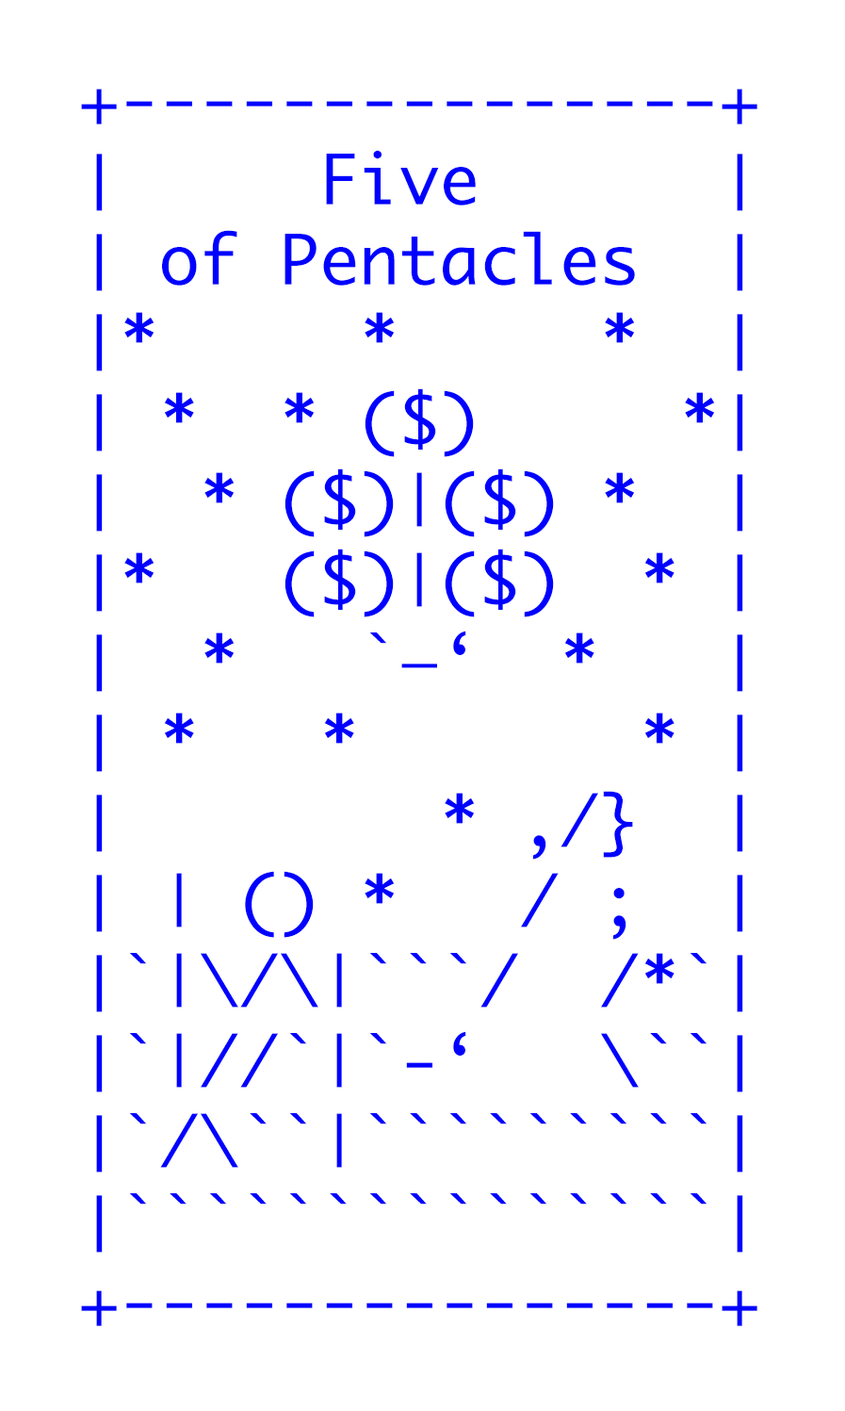
<style>
.page{position:relative;width:845px;height:1411px;background:#ffffff}
.page>*{position:absolute;margin:0}
.t1{font:66.7px "Monaco";color:#0000ff}
</style>
<div class="page">
<p class="t1" style="left:81px;top:89px;width:677px;height:1237px">+---------------+<br>│     Five      │<br>│ of Pentacles  │<br>│*     *     *  │<br>│ *  * ($)     *│<br>│  * ($)|($) *  │<br>│*   ($)|($)  * │<br>│  *   `—‘  *   │ <br>│ *   *       * │ <br>│        * ,/}  │<br>│ | () *   / ;  │ <br>│`|\/\|```/  /*`│ <br>│`|//`|`-‘   \``│<br>│`/\``|`````````│<br>│```````````````│<br>+---------------+</p>
</div>
